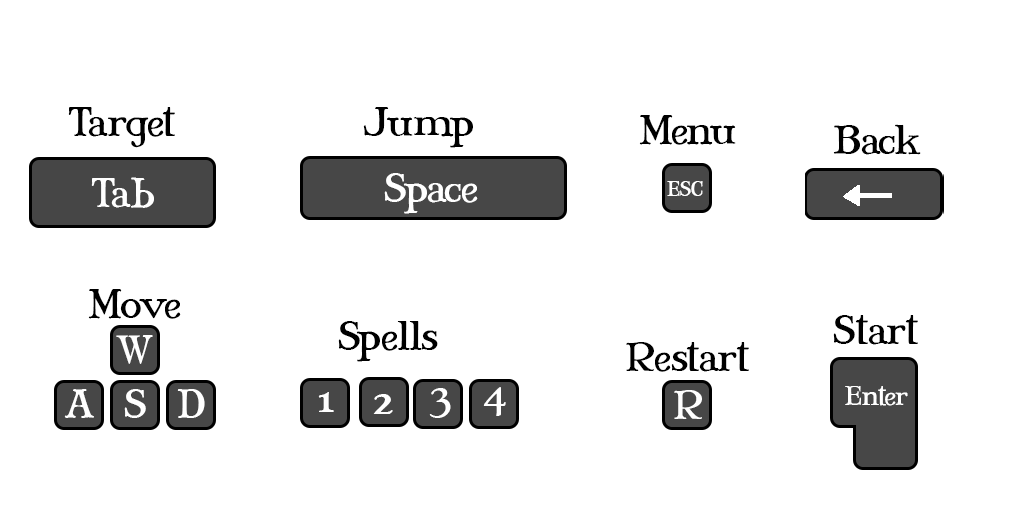
<style>
.page{position:relative;width:1024px;height:512px;background:#ffffff}
.page>*{position:absolute;margin:0}
.t1{font:36px "MaryJaneAntique";color:#000000}
.t2{font:36px "MaryJaneAntique";color:#ffffff}
.t3{font:18px "MaryJaneAntique";color:#ffffff}
.t4{font:24px "MaryJaneAntique";color:#ffffff}
</style>
<div class="page">
<p class="t1" style="left:68px;top:107px;width:107px;height:41px">Target</p>
<p class="t1" style="left:363px;top:107px;width:110px;height:41px">Jump</p>
<p class="t1" style="left:639px;top:115px;width:97px;height:30px">Menu</p>
<p class="t1" style="left:833px;top:124px;width:88px;height:31px">Back</p>
<p class="t2" style="left:384px;top:173px;width:94px;height:41px">Space</p>
<p class="t2" style="left:91px;top:177px;width:63px;height:31px">Tab</p>
<p class="t3" style="left:667px;top:181px;width:36px;height:15px">ESC</p>
<p class="t1" style="left:88px;top:289px;width:93px;height:30px">Move</p>
<p class="t1" style="left:833px;top:315px;width:85px;height:30px">Start</p>
<p class="t1" style="left:338px;top:321px;width:100px;height:41px">Spells</p>
<p class="t2" style="left:116px;top:335px;width:37px;height:29px">W</p>
<p class="t1" style="left:626px;top:342px;width:123px;height:30px">Restart</p>
<p class="t2" style="left:64px;top:389px;width:30px;height:29px">A</p>
<p class="t2" style="left:124px;top:389px;width:22px;height:29px">S</p>
<p class="t2" style="left:177px;top:389px;width:28px;height:29px">D</p>
<p class="t2" style="left:429px;top:388px;width:22px;height:30px">3</p>
<p class="t2" style="left:483px;top:387px;width:23px;height:29px">4</p>
<p class="t2" style="left:674px;top:390px;width:28px;height:29px">R</p>
<p class="t4" style="left:845px;top:386px;width:63px;height:20px">Enter</p>
<p class="t2" style="left:318px;top:392px;width:16px;height:20px">1</p>
<p class="t2" style="left:373px;top:394px;width:20px;height:20px">2</p>
</div>
